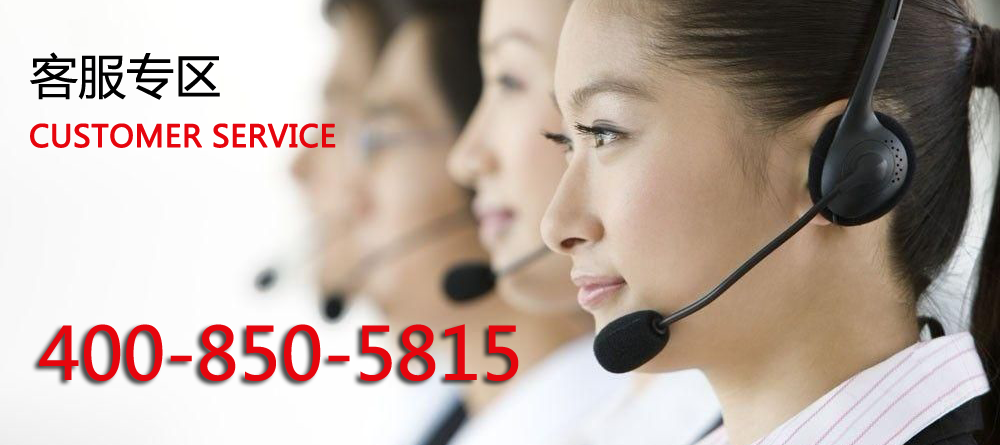
<style>
.page{position:relative;width:1000px;height:445px}
.page>*{position:absolute;margin:0}
.t1{font:48px "MicrosoftYaHei";color:#010101}
.t2{font:30px "MicrosoftYaHei";color:#e6050d;font-weight:bold}
.t3{font:72px "MicrosoftYaHei";color:#e6050d}
</style>
<div class="page">
<p class="t1" style="left:30px;top:52px;width:190px;height:48px">客服专区</p>
<p class="t2" style="left:30px;top:123px;width:306px;height:25px">CUSTOMER SERVICE</p>
<p class="t3" style="left:39px;top:324px;width:480px;height:57px">400-850-5815</p>
</div>
